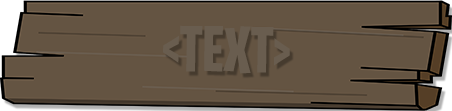
<style>
.page{position:relative;width:452px;height:111px;background:#645442}
.page>*{position:absolute;margin:0}
.t1{font:65px "BurbankBigCondensed-Bold";color:#695d4f}
</style>
<div class="page">
<p class="t1" style="left:163px;top:25px;width:127px;height:49px;rotate:1deg">&lt;TEXT&gt;</p>
</div>
